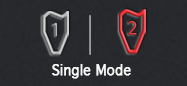
<style>
.page{position:relative;width:187px;height:86px;background:#27292d}
.page>*{position:absolute;margin:0}
.t1{font:13.2px "Geneva";color:#f9f9f9;font-weight:bold}
</style>
<div class="page">
<p class="t1" style="left:52px;top:64px;width:79px;height:15px">Single Mode</p>
</div>
